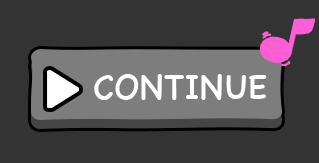
<style>
.page{position:relative;width:319px;height:163px;background:#333333}
.page>*{position:absolute;margin:0}
.t1{font:36px "ChalkboardSE";color:#ffffff}
</style>
<div class="page">
<p class="t1" style="left:94px;top:74px;width:173px;height:26px">CONTINUE</p>
</div>
